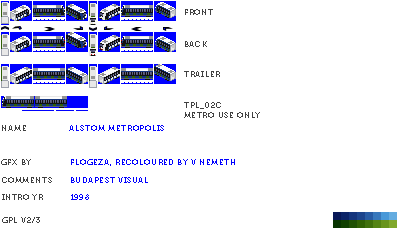
<style>
.page{position:relative;width:400px;height:230px;background:#ffffff}
.page>*{position:absolute;margin:0}
.t1{font:8px "Museo700-Regular";letter-spacing:0.075em;color:#404040;text-transform:uppercase}
.t2{font:8px "Museo700-Regular";letter-spacing:0.075em;color:#0000ff;text-transform:uppercase}
</style>
<div class="page">
<p class="t1" style="left:185px;top:9px;width:28px;height:6px">front</p>
<p class="t1" style="left:185px;top:41px;width:22px;height:6px">back</p>
<p class="t1" style="left:184px;top:71px;width:36px;height:6px">trailer</p>
<p class="t1" style="left:184px;top:102px;width:76px;height:16px">tpl_02c<br>metro use only</p>
<p class="t1" style="left:2px;top:125px;width:24px;height:6px">name</p>
<p class="t2" style="left:69px;top:125px;width:95px;height:6px">Alstom Metropolis</p>
<p class="t1" style="left:1px;top:159px;width:30px;height:6px">gfx by</p>
<p class="t2" style="left:71px;top:159px;width:164px;height:7px">flogeza, recoloured by v nemeth</p>
<p class="t1" style="left:2px;top:177px;width:50px;height:6px">comments</p>
<p class="t2" style="left:71px;top:177px;width:77px;height:6px">budapest visual</p>
<p class="t1" style="left:2px;top:194px;width:41px;height:6px">intro yr</p>
<p class="t2" style="left:71px;top:194px;width:18px;height:6px">1998</p>
<p class="t1" style="left:2px;top:217px;width:38px;height:6px">gpl v2/3</p>
</div>
